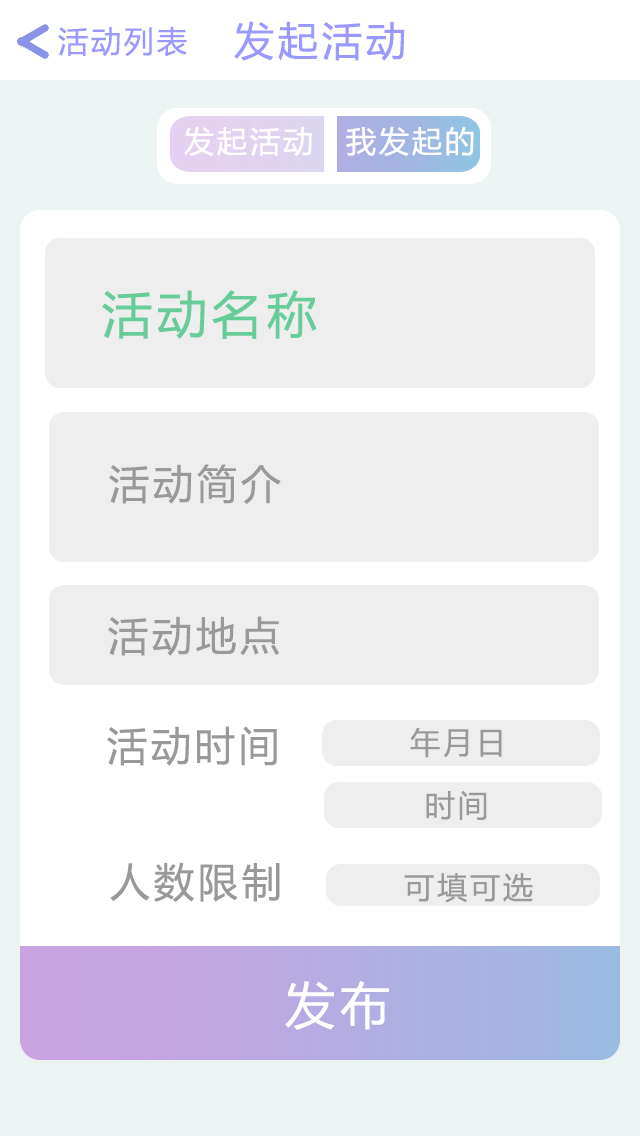
<style>
.page{position:relative;width:640px;height:1136px;background:#eeeeee}
.page>*{position:absolute;margin:0}
.t1{font:30px "MicrosoftYaHei";letter-spacing:0.1em;color:#9999ff}
.t2{font:40px "MicrosoftYaHei";letter-spacing:0.1em;color:#9999ff}
.t3{font:30px "MicrosoftYaHei";letter-spacing:0.1em;color:#ffffff}
.t4{font:50px "MicrosoftYaHei";letter-spacing:0.1em;color:#66cc99}
.t5{font:40px "MicrosoftYaHei";letter-spacing:0.1em;color:#999999}
.t6{font:30px "MicrosoftYaHei";letter-spacing:0.1em;color:#999999}
.t7{font:50px "MicrosoftYaHei";letter-spacing:0.1em;color:#ffffff}
</style>
<div class="page">
<p class="t1" style="left:58px;top:26px;width:129px;height:31px">活动列表</p>
<p class="t2" style="left:234px;top:21px;width:171px;height:40px">发起活动</p>
<p class="t3" style="left:184px;top:126px;width:128px;height:31px">发起活动</p>
<p class="t3" style="left:346px;top:126px;width:128px;height:31px">我发起的</p>
<p class="t4" style="left:102px;top:290px;width:215px;height:49px">活动名称</p>
<p class="t5" style="left:109px;top:464px;width:172px;height:40px">活动简介</p>
<p class="t5" style="left:108px;top:616px;width:171px;height:40px">活动地点</p>
<p class="t5" style="left:107px;top:726px;width:170px;height:40px">活动时间</p>
<p class="t6" style="left:410px;top:727px;width:92px;height:31px">年月日</p>
<p class="t6" style="left:426px;top:791px;width:61px;height:29px">时间</p>
<p class="t5" style="left:110px;top:862px;width:170px;height:40px">人数限制</p>
<p class="t6" style="left:404px;top:873px;width:129px;height:30px">可填可选</p>
<p class="t7" style="left:285px;top:981px;width:104px;height:49px">发布</p>
</div>
